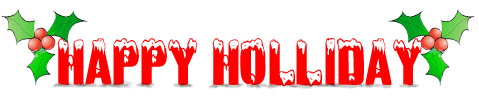
<style>
.page{position:relative;width:479px;height:97px;background:#ffffff}
.page>*{position:absolute;margin:0}
.t1{font:57.9px "QTSnowCaps";color:#fe0000;scale:0.88 1}
</style>
<div class="page">
<p class="t1" style="left:57px;top:38px;width:366px;height:49px">Happy Holliday</p>
</div>
